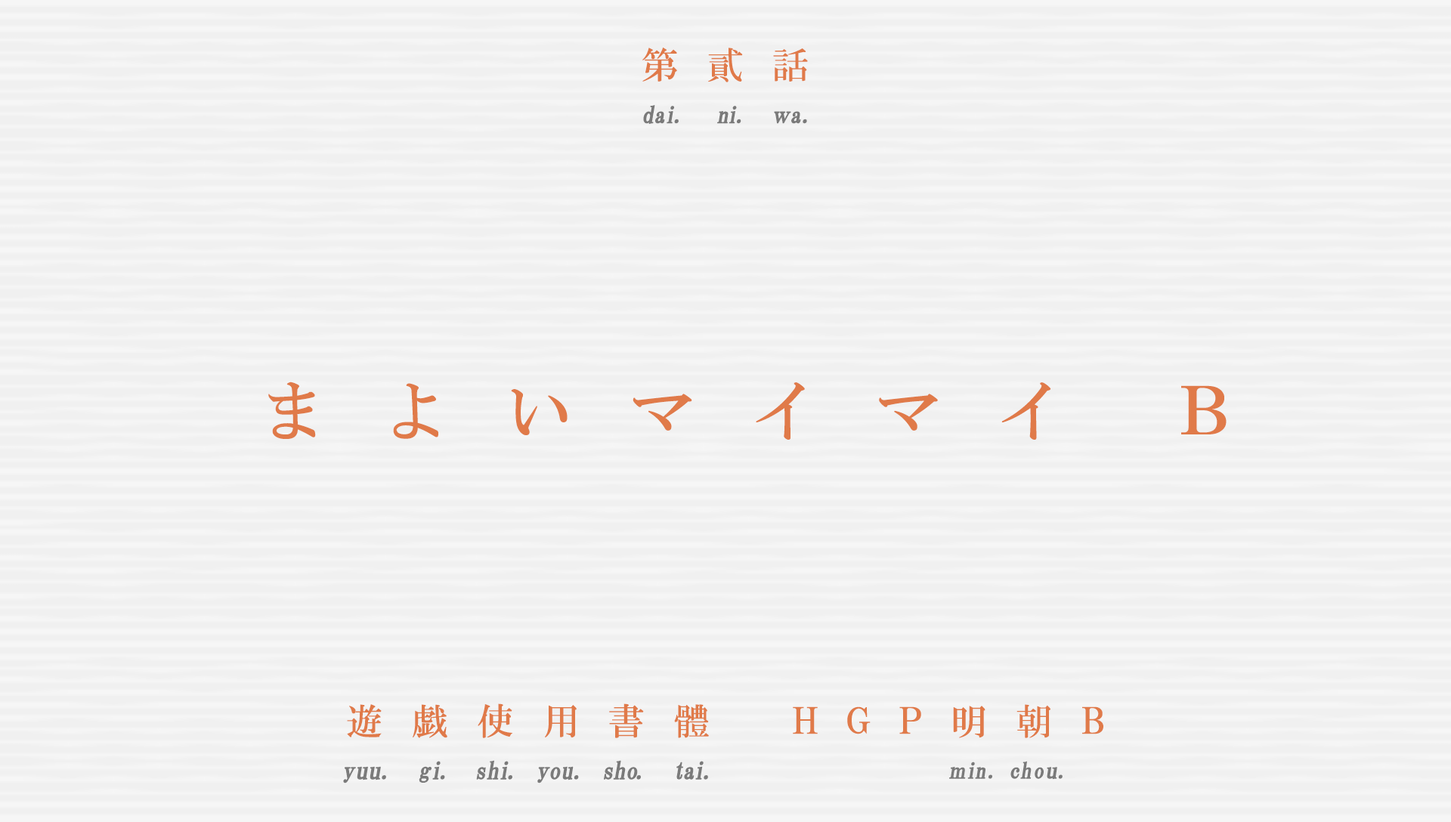
<style>
.page{position:relative;width:1451px;height:822px;background:#f0f0f0}
.page>*{position:absolute;margin:0}
.t1{font:36.5px "HGMinchoB";letter-spacing:0.79em;color:#e07a49}
.t2{font:23.2px "HGMinchoB";letter-spacing:-0.1em;color:#7a7a7a;font-weight:bold;scale:0.96 1}
.t3{font:23.2px "HGMinchoB";color:#7a7a7a;font-weight:bold;scale:0.96 1}
.t4{font:23.2px "HGMinchoB";letter-spacing:-0.075em;color:#7a7a7a;font-weight:bold;scale:0.96 1}
.t5{font:23.2px "HGMinchoB";letter-spacing:0.07em;color:#7a7a7a;font-weight:bold;scale:0.96 1}
.t6{font:23.2px "HGMinchoB";letter-spacing:-0.05em;color:#7a7a7a;font-weight:bold;scale:0.86 1}
.t7{font:65.7px "HGMinchoB";letter-spacing:0.87em;color:#e07a49}
.t8{font:36.3px "HGMinchoB";letter-spacing:0.81em;color:#e07a49}
.t9{font:36.3px "HGMinchoB";letter-spacing:0.8em;color:#e07a49}
.t10{font:36.3px "HGMinchoB";letter-spacing:0.79em;color:#e07a49}
.t11{font:36.3px "HGMinchoB";letter-spacing:0.71em;color:#e07a49;scale:0.85 1}
.t12{font:36.3px "HGMinchoB";letter-spacing:0.53em;color:#e07a49}
.t13{font:24.2px "HGMinchoB";color:#7a7a7a;font-weight:bold}
.t14{font:24.2px "HGMinchoB";letter-spacing:0.025em;color:#7a7a7a;font-weight:bold;scale:0.96 1}
.t15{font:24.2px "HGMinchoB";letter-spacing:0.075em;color:#7a7a7a;font-weight:bold;scale:0.96 1}
.t16{font:24.2px "HGMinchoB";letter-spacing:-0.025em;color:#7a7a7a;font-weight:bold;scale:0.96 1}
.t17{font:24.2px "HGMinchoB";letter-spacing:-0.11em;color:#7a7a7a;font-weight:bold;scale:0.96 1}
.t18{font:24.2px "HGMinchoB";color:#7a7a7a;font-weight:bold;scale:0.96 1}
.t19{font:24.2px "HGMinchoB";letter-spacing:-0.05em;color:#7a7a7a;font-weight:bold;scale:0.96 1}
.t20{font:24.2px "HGMinchoB";letter-spacing:-0.12em;color:#7a7a7a;font-weight:bold;scale:0.96 1}
.t21{font:24.2px "HGMinchoB";letter-spacing:-0.01em;color:#7a7a7a;font-weight:bold;scale:0.96 1}
.t22{font:24.2px "HGMinchoB";letter-spacing:0.005em;color:#7a7a7a;font-weight:bold;scale:0.96 1}
.t23{font:24.2px "HGMinchoB";letter-spacing:-0.09em;color:#7a7a7a;font-weight:bold;scale:0.96 1}
.t24{font:24.2px "HGMinchoB";letter-spacing:-0.075em;color:#7a7a7a;font-weight:bold;scale:0.96 1}
.t25{font:24.2px "HGMinchoB";letter-spacing:-0.1em;color:#7a7a7a;font-weight:bold;scale:0.96 1}
.t26{font:22px "HGMinchoB";letter-spacing:0.07em;color:#7a7a7a;font-weight:bold;scale:0.96 1}
.t27{font:22px "HGMinchoB";letter-spacing:-0.075em;color:#7a7a7a;font-weight:bold;scale:0.83 1}
.t28{font:22px "HGMinchoB";letter-spacing:-0.075em;color:#7a7a7a;font-weight:bold;scale:0.96 1}
.t29{font:22px "HGMinchoB";color:#7a7a7a;font-weight:bold;scale:0.96 1}
.t30{font:22px "HGMinchoB";letter-spacing:0.05em;color:#7a7a7a;font-weight:bold;scale:0.96 1}
.t31{font:22px "HGMinchoB";letter-spacing:0.01em;color:#7a7a7a;font-weight:bold;scale:1.06 1}
</style>
<div class="page">
<p class="t1" style="left:642px;top:48px;width:166px;height:34px">第貳話</p>
<p class="t2" style="left:643px;top:105px;width:164px;height:19px"><span class="t3">d</span><span class="t4">a</span>i<span class="t5">.  </span>ni<span class="t5">.  </span><span class="t6">ｗ</span><span class="t3">a</span><span class="t5">.</span></p>
<p class="t7" style="left:268px;top:382px;width:958px;height:58px">まよいマイマイ Ｂ</p>
<p class="t8" style="left:347px;top:703px;width:362px;height:35px">遊<span class="t9">戯</span>使<span class="t10">用</span>書體</p>
<p class="t11" style="left:793px;top:706px;width:310px;height:28px">ＨＧＰ    Ｂ</p>
<p class="t10" style="left:953px;top:704px;width:97px;height:34px">明<span class="t12">朝</span></p>
<p class="t13" style="left:343px;top:760px;width:365px;height:23px"><span class="t14">y</span>uu<span class="t15">. </span><span class="t16">g</span><span class="t17">i</span><span class="t15">. </span><span class="t18">s</span><span class="t19">h</span><span class="t20">i</span><span class="t15">. </span><span class="t21">y</span><span class="t22">ou</span><span class="t15">. </span><span class="t16">s</span><span class="t18">h</span><span class="t23">o</span><span class="t15">.  </span><span class="t24">t</span><span class="t25">ai</span><span class="t15">.</span></p>
<p class="t26" style="left:949px;top:761px;width:113px;height:19px"><span class="t27">ｍ</span><span class="t28">i</span>n. <span class="t29">c</span>h<span class="t30">o</span><span class="t31">u</span>.</p>
</div>
